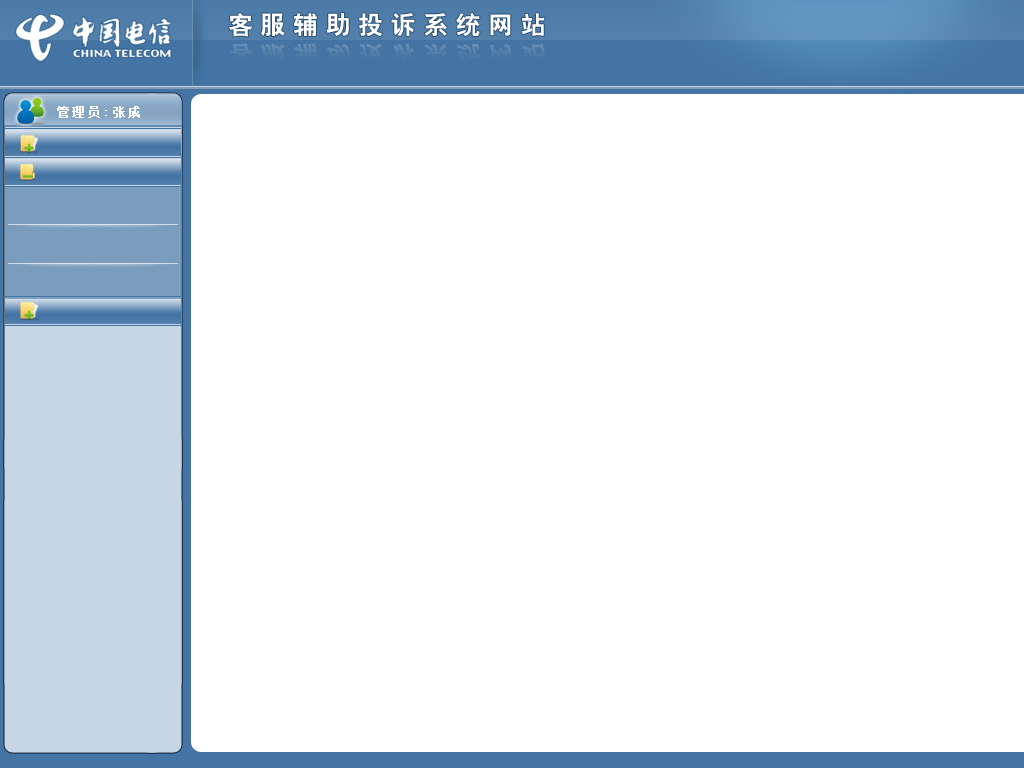
<style>
.page{position:relative;width:1024px;height:768px;background:#ffffff}
.page>*{position:absolute;margin:0}
.t1{font:25px "HYb2gj";letter-spacing:0.3em;color:#ffffff}
.t2{font:25px "HYb2gj";letter-spacing:0.3em;color:#4c7ba7;font-style:italic}
.t3{font:12px "SimSun";letter-spacing:0.2em;color:#ffffff;font-weight:bold}
</style>
<div class="page">
<p class="t1" style="left:229px;top:13px;width:316px;height:24px">客服辅助投诉系统网站</p>
<p class="t2" style="left:230px;top:43px;width:317px;height:24px">客服辅助投诉系统网站</p>
<p class="t3" style="left:57px;top:106px;width:83px;height:12px">管理员:张成</p>
</div>
